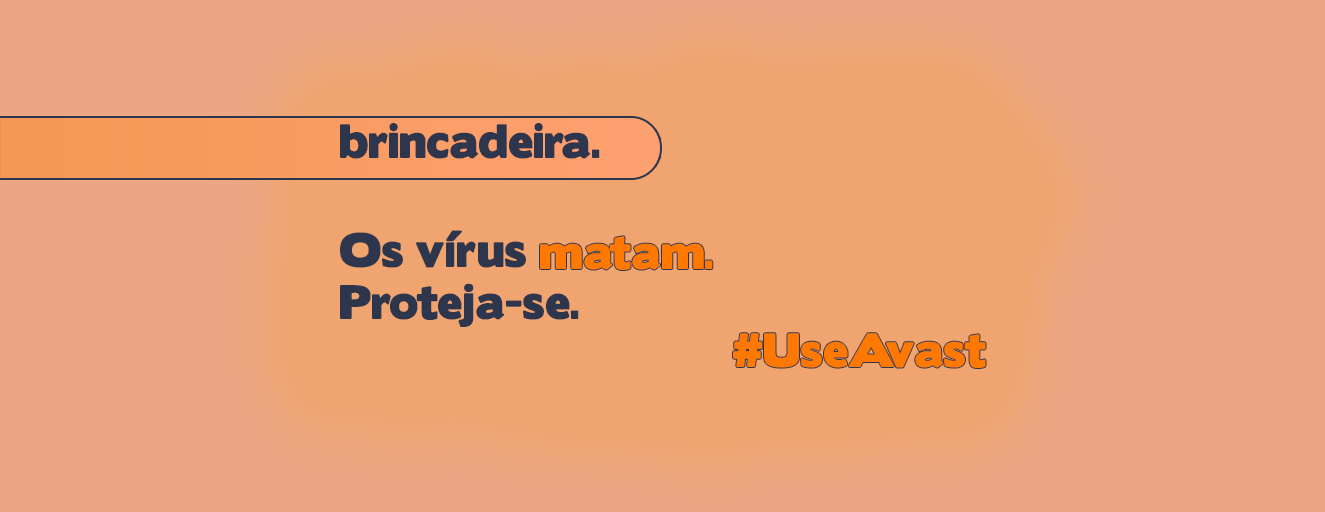
<style>
.page{position:relative;width:1325px;height:512px;background:#eba784}
.page>*{position:absolute;margin:0}
.t1{font:43.1px "BorisBlackBloxx";color:#2d364c}
.t2{font:43.2px "BorisBlackBloxx";color:#2d364c}
.t3{font:43.1px "BorisBlackBloxx";color:#ff7800}
</style>
<div class="page">
<p class="t1" style="left:340px;top:123px;width:260px;height:36px">brincadeira.</p>
<p class="t2" style="left:340px;top:230px;width:239px;height:97px">Os vírus<br>Proteja-se.</p>
<p class="t3" style="left:540px;top:236px;width:173px;height:34px">matam.</p>
<p class="t3" style="left:733px;top:333px;width:253px;height:35px">#UseAvast</p>
</div>
